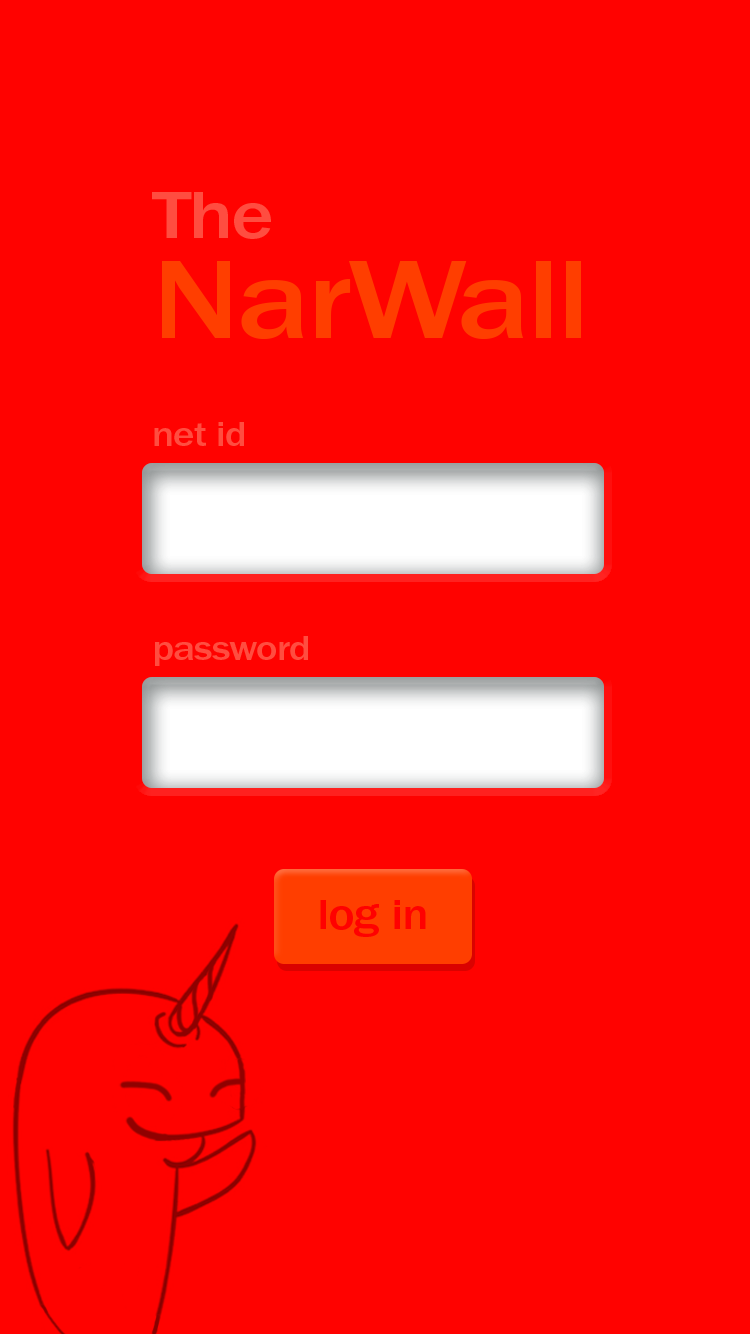
<style>
.page{position:relative;width:750px;height:1334px;background:#ff0200}
.page>*{position:absolute;margin:0}
.t1{font:115.5px/99.6px "ITCFranklinGothicStd-Med";letter-spacing:-0.025em;color:#ff3e00;scale:1.18 1}
.t2{font:69.3px/117.7px "ITCFranklinGothicStd-Med";letter-spacing:-0.025em;color:#ff4d40;scale:1.18 1}
.t3{font:34.6px "ITCFranklinGothicStd-Med";letter-spacing:-0.025em;color:#ff4d40;scale:1.18 1}
.t4{font:115.5px "ITCFranklinGothicStd-Med";letter-spacing:-0.025em;color:#ff4d40;scale:1.18 1}
.t5{font:42.3px "ITCFranklinGothicStd-Med";letter-spacing:-0.025em;color:#ff0100;scale:1.18 1}
</style>
<div class="page">
<p class="t1" style="left:152px;top:192px;width:429px;height:147px"><span class="t2">The <br></span>NarWall</p>
<p class="t3" style="left:154px;top:422px;width:90px;height:24px">net id id<span class="t4">n</span></p>
<p class="t3" style="left:155px;top:636px;width:153px;height:30px">password</p>
<p class="t5" style="left:320px;top:900px;width:106px;height:37px">log in</p>
</div>
